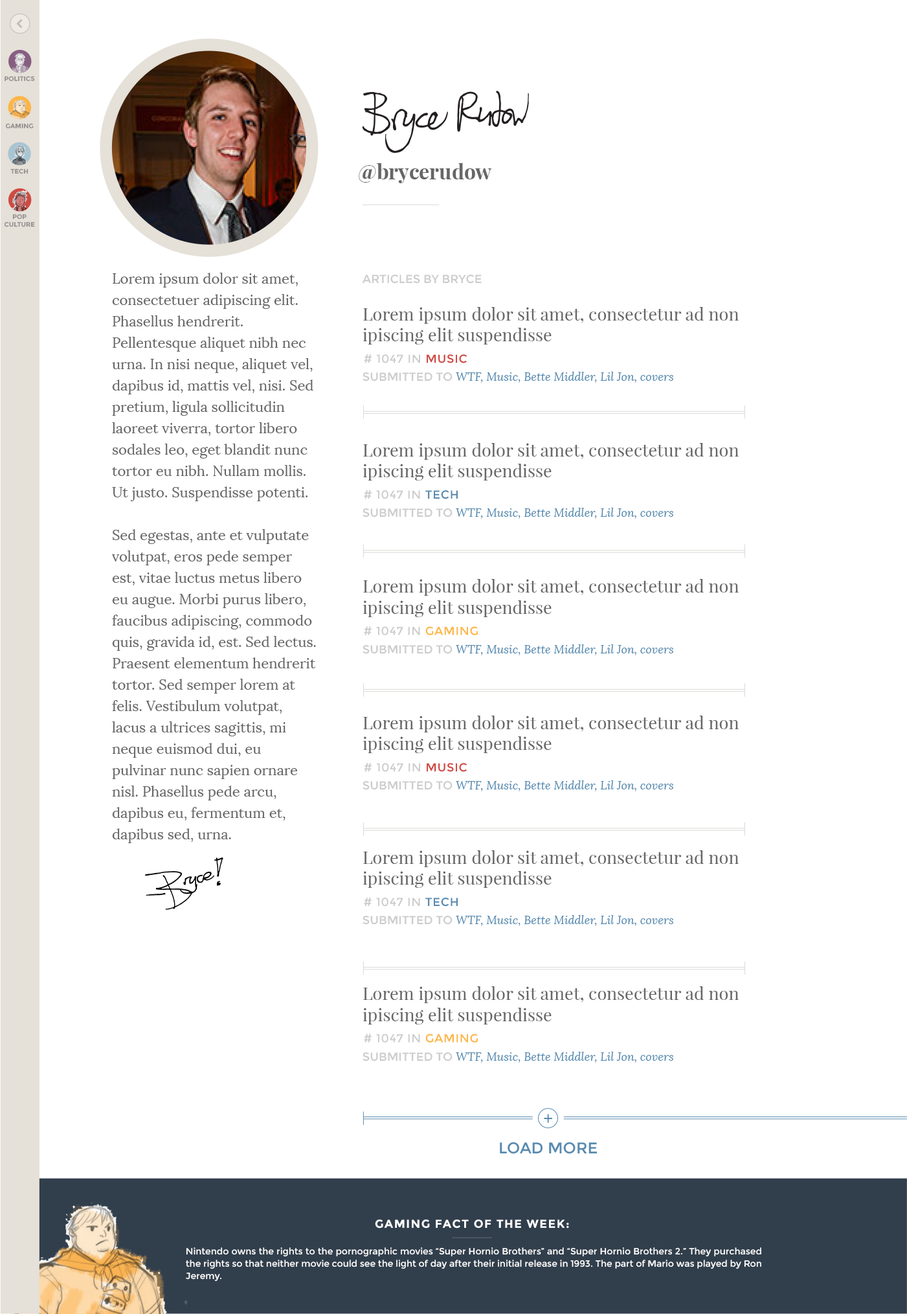
<style>
.page{position:relative;width:907px;height:1314px;background:#ffffff}
.page>*{position:absolute;margin:0}
.t1{font:6.5px "Montserrat-Bold";color:#96918f}
.t2{font:20.7px "PlayfairDisplay-Bold";color:#666666}
.t3{font:14.2px/21.4px "Lora-Regular";color:#666666}
.t4{font:11.7px "Montserrat-Regular";color:#cccccc;text-transform:uppercase}
.t5{font:17.5px/21px "PlayfairDisplay-Regular";color:#666666}
.t6{font:11.7px "Lora-Italic";color:#588aaf}
.t7{font:17.5px "OpenSans";color:#588aaf}
.t8{font:15.5px "Montserrat-Regular";color:#588aaf;text-transform:uppercase}
.t9{font:11.7px "Montserrat-Bold";letter-spacing:0.08em;color:#ffffff;text-transform:uppercase}
.t10{font:9.1px/12.3px "Montserrat-Regular";color:#ffffff}
</style>
<div class="page">
<p class="t1" style="left:5px;top:76px;width:30px;height:6px">POLITICS</p>
<p class="t1" style="left:5px;top:123px;width:29px;height:6px">GAMING</p>
<p class="t1" style="left:10px;top:168px;width:18px;height:6px">TECH</p>
<p class="t2" style="left:359px;top:163px;width:133px;height:20px">@brycerudow</p>
<p class="t1" style="left:4px;top:214px;width:31px;height:13px;text-align:center">POP<br>CULTURE</p>
<p class="t3" style="left:112px;top:273px;width:204px;height:570px">Lorem ipsum dolor sit amet, consectetuer adipiscing elit. Phasellus hendrerit. Pellentesque aliquet nibh nec urna. In nisi neque, aliquet vel, dapibus id, mattis vel, nisi. Sed pretium, ligula sollicitudin laoreet viverra, tortor libero sodales leo, eget blandit nunc tortor eu nibh. Nullam mollis. Ut justo. Suspendisse potenti.<br><br>Sed egestas, ante et vulputate volutpat, eros pede semper est, vitae luctus metus libero eu augue. Morbi purus libero, faucibus adipiscing, commodo quis, gravida id, est. Sed lectus. Praesent elementum hendrerit tortor. Sed semper lorem at felis. Vestibulum volutpat, lacus a ultrices sagittis, mi neque euismod dui, eu pulvinar nunc sapien ornare nisl. Phasellus pede arcu, dapibus eu, fermentum et, dapibus sed, urna.</p>
<p class="t4" style="left:362px;top:275px;width:120px;height:9px">Articles by bryce</p>
<p class="t5" style="left:363px;top:307px;width:377px;height:38px">Lorem ipsum dolor sit amet, consectetur ad non ipiscing elit suspendisse</p>
<p class="t6" style="left:363px;top:372px;width:311px;height:11px"><span class="t4">Submitted to </span>WTF, Music, Bette Middler, Lil Jon, covers</p>
<p class="t5" style="left:363px;top:443px;width:377px;height:38px">Lorem ipsum dolor sit amet, consectetur ad non ipiscing elit suspendisse</p>
<p class="t6" style="left:363px;top:508px;width:311px;height:11px"><span class="t4">Submitted to </span>WTF, Music, Bette Middler, Lil Jon, covers</p>
<p class="t5" style="left:363px;top:579px;width:377px;height:38px">Lorem ipsum dolor sit amet, consectetur ad non ipiscing elit suspendisse</p>
<p class="t6" style="left:363px;top:644px;width:311px;height:11px"><span class="t4">Submitted to </span>WTF, Music, Bette Middler, Lil Jon, covers</p>
<p class="t5" style="left:363px;top:716px;width:377px;height:37px">Lorem ipsum dolor sit amet, consectetur ad non ipiscing elit suspendisse</p>
<p class="t6" style="left:363px;top:780px;width:311px;height:11px"><span class="t4">Submitted to </span>WTF, Music, Bette Middler, Lil Jon, covers</p>
<p class="t5" style="left:363px;top:850px;width:377px;height:38px">Lorem ipsum dolor sit amet, consectetur ad non ipiscing elit suspendisse</p>
<p class="t6" style="left:363px;top:915px;width:311px;height:11px"><span class="t4">Submitted to </span>WTF, Music, Bette Middler, Lil Jon, covers</p>
<p class="t5" style="left:363px;top:986px;width:377px;height:39px">Lorem ipsum dolor sit amet, consectetur ad non ipiscing elit suspendisse</p>
<p class="t6" style="left:363px;top:1052px;width:311px;height:11px"><span class="t4">Submitted to </span>WTF, Music, Bette Middler, Lil Jon, covers</p>
<p class="t7" style="left:544px;top:1114px;width:8px;height:9px">+</p>
<p class="t8" style="left:500px;top:1142px;width:97px;height:12px">Load more</p>
<p class="t9" style="left:375px;top:1220px;width:194px;height:9px">Gaming Fact Of The Week:</p>
<p class="t10" style="left:186px;top:1247px;width:576px;height:35px;text-align:justify">Nintendo owns the rights to the pornographic movies “Super Hornio Brothers” and “Super Hornio Brothers 2.” They purchased the rights so that neither movie could see the light of day after their initial release in 1993. The part of Mario was played by Ron Jeremy.</p>
</div>
